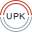
<style>
.page{position:relative;width:32px;height:32px;background:#ffffff}
.page>*{position:absolute;margin:0}
.t1{font:8px "HelveticaNeueLTPro-Th";letter-spacing:0.15em;color:#2c3e50;text-transform:uppercase;font-weight:bold}
</style>
<div class="page">
<p class="t1" style="left:6px;top:13px;width:19px;height:7px">UPK</p>
</div>
